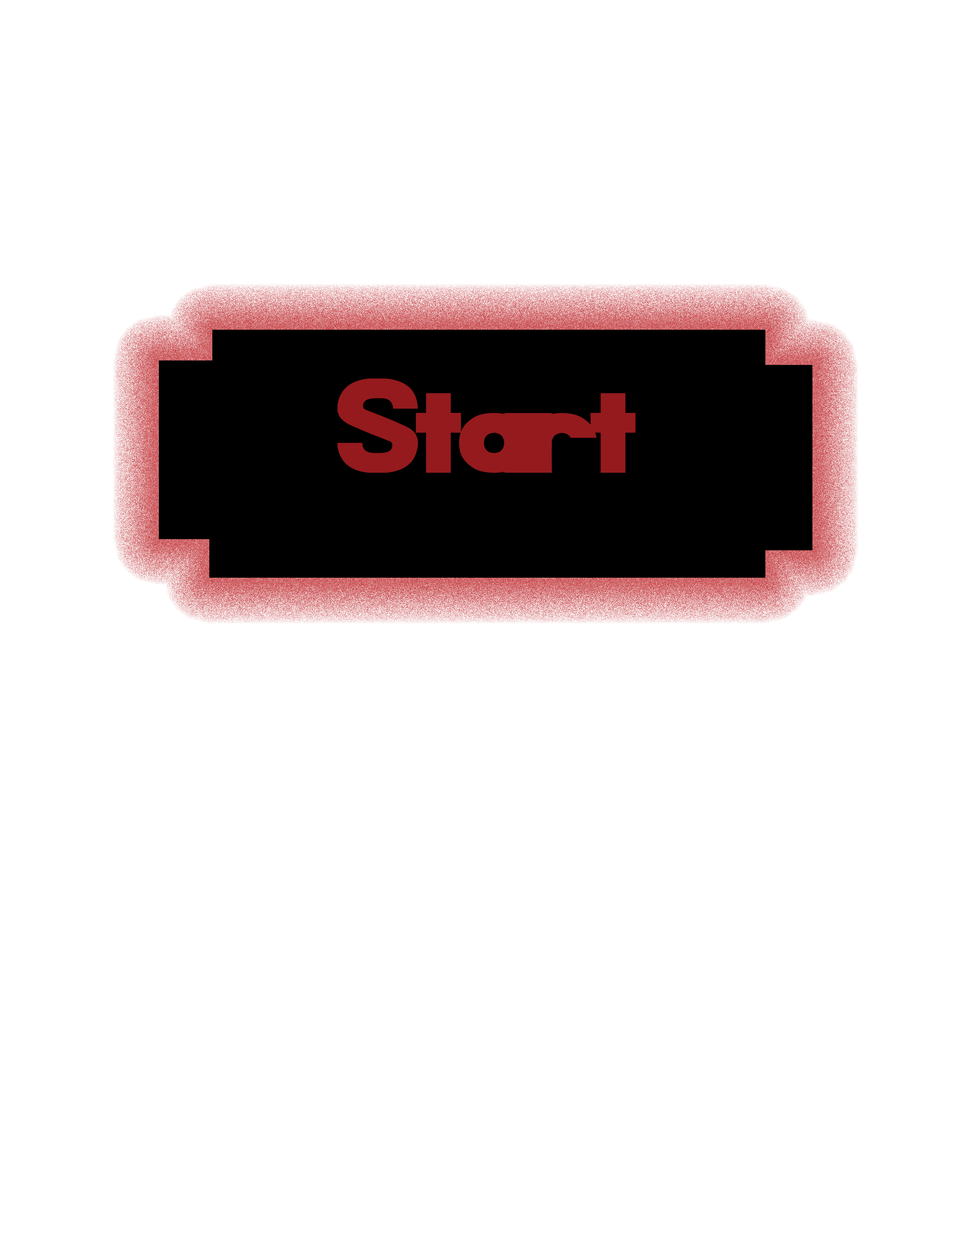
<style>
.page{position:relative;width:960px;height:1242px;background:#ffffff}
.page>*{position:absolute;margin:0}
.t1{font:94.1px "Sematary";color:#941a1d}
</style>
<div class="page">
<p class="t1" style="left:337px;top:378px;width:298px;height:95px">Start</p>
</div>
